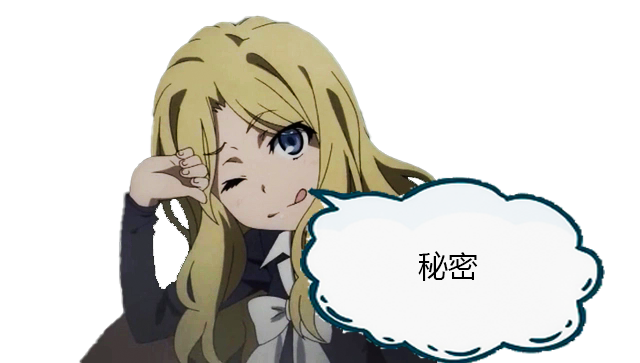
<style>
.page{position:relative;width:640px;height:363px;background:#ffffff}
.page>*{position:absolute;margin:0}
.t1{font:30px "MicrosoftYaHei";color:#000000}
</style>
<div class="page">
<p class="t1" style="left:418px;top:251px;width:60px;height:30px">秘密</p>
</div>
